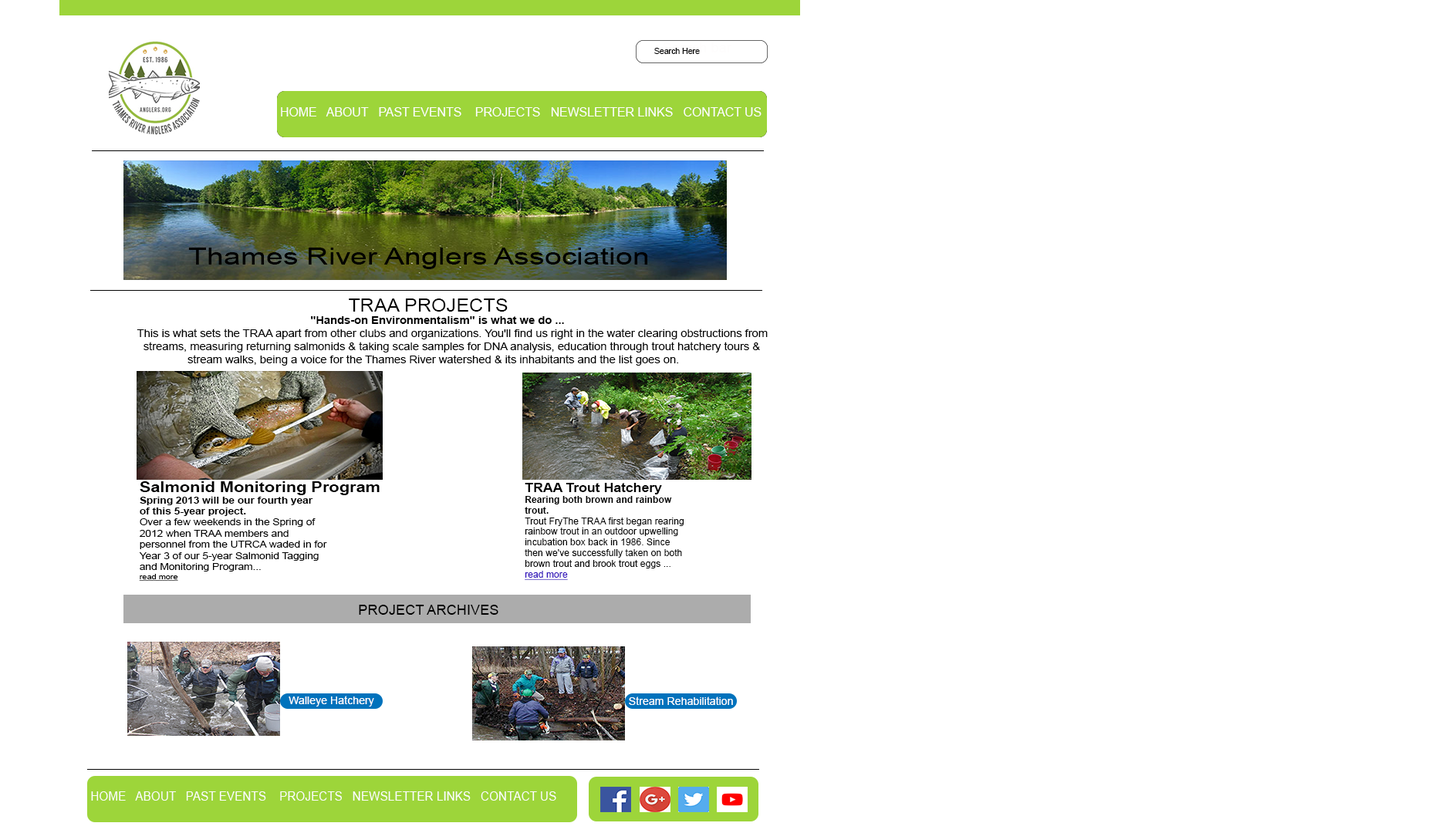
<style>
.page{position:relative;width:1432px;height:833px;background:#ffffff}
.page>*{position:absolute;margin:0}
.t1{font:8.5px "ArialMT";color:#040404;scale:0.96 1}
.t2{font:13.9px "ArialMT";color:#040404;scale:0.96 1}
.t3{font:12.2px "ArialMT";color:#fefdfd}
.t4{font:23.1px "ArialMT";color:#000000;scale:1.31 1}
.t5{font:10.8px "ArialMT";color:#000000;scale:1.05 1}
.t6{font:18.5px "ArialMT";color:#000000;scale:1.05 1}
.t7{font:10.8px "Arial-BoldMT";color:#000000;scale:1.05 1}
.t8{font:9.3px "ArialMT";color:#010101;scale:1.14 1}
.t9{font:14.8px "Arial-BoldMT";color:#010101;scale:1.14 1}
.t10{font:9.3px "Arial-BoldMT";color:#010101;scale:1.14 1}
.t11{font:7.4px "ArialMT";color:#010101;text-decoration:underline;scale:1.14 1}
.t12{font:8.9px "ArialMT";color:#010101;scale:1.06 1}
.t13{font:12.9px "Arial-BoldMT";color:#010101;scale:1.06 1}
.t14{font:8.9px "Arial-BoldMT";color:#010101;scale:1.06 1}
.t15{font:8.9px "ArialMT";color:#300fbb;text-decoration:underline;scale:1.06 1}
.t16{font:13.9px "ArialMT";color:#000000}
.t17{font:10.8px "ArialMT";color:#fefefe}
.t18{font:12.3px "ArialMT";color:#fefdfd;scale:0.96 1}
</style>
<div class="page">
<p class="t1" style="left:654px;top:48px;width:46px;height:6px"><span class="t2">  </span>  Search Here</p>
<p class="t3" style="left:281px;top:107px;width:480px;height:9px">HOME   ABOUT   PAST EVENTS    PROJECTS   NEWSLETTER LINKS   CONTACT US</p>
<p class="t4" style="left:188px;top:248px;width:459px;height:21px">Thames River Anglers Association</p>
<p class="t5" style="left:137px;top:298px;width:630px;height:68px"><span class="t6">TRAA PROJECTS<br>                                                       </span><span class="t7">"Hands-on Environmentalism" is what we do ...<br></span>This is what sets the TRAA apart from other clubs and organizations. You'll find us right in the water clearing obstructions from <br>  streams, measuring returning salmonids &amp; taking scale samples for DNA analysis, education through trout hatchery tours &amp; <br>                stream walks, being a voice for the Thames River watershed &amp; its inhabitants and the list goes on.</p>
<p class="t8" style="left:139px;top:481px;width:240px;height:101px"><span class="t9">Salmonid Monitoring Program<br></span><span class="t10">Spring 2013 will be our fourth year <br>of this 5-year project.<br></span>Over a few weekends in the Spring of <br>2012 when TRAA members and <br>personnel from the UTRCA waded in for <br>Year 3 of our 5-year Salmonid Tagging <br>and Monitoring Program...<br><span class="t11">read more</span></p>
<p class="t12" style="left:524px;top:483px;width:159px;height:97px"><span class="t13">TRAA Trout Hatchery<br></span><span class="t14">Rearing both brown and rainbow <br>trout.<br></span>Trout FryThe TRAA first began rearing <br>rainbow trout in an outdoor upwelling<br>incubation box back in 1986. Since <br>then we've successfully taken on both <br>brown trout and brook trout eggs ...<br><span class="t15">read more</span></p>
<p class="t16" style="left:359px;top:605px;width:139px;height:10px">PROJECT ARCHIVES</p>
<p class="t17" style="left:288px;top:696px;width:86px;height:10px">Walleye Hatchery</p>
<p class="t17" style="left:629px;top:696px;width:104px;height:9px">Stream Rehabilitation</p>
<p class="t18" style="left:91px;top:791px;width:465px;height:10px">HOME   ABOUT   PAST EVENTS    PROJECTS   NEWSLETTER LINKS   CONTACT US</p>
</div>
